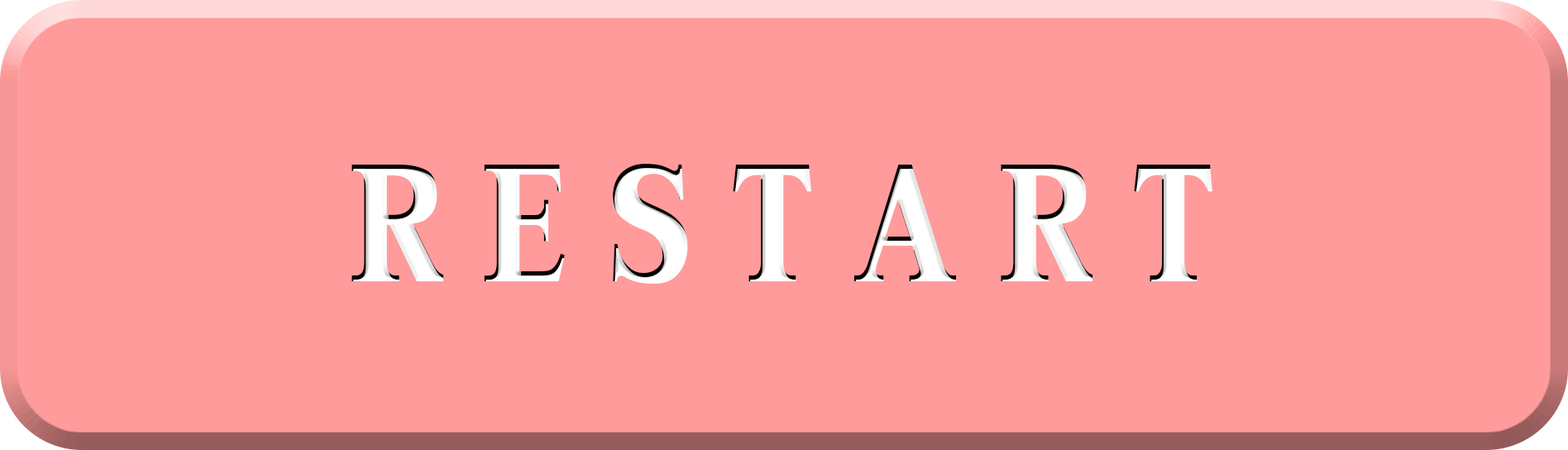
<style>
.page{position:relative;width:1568px;height:450px;background:#ff9b9b}
.page>*{position:absolute;margin:0}
.t1{font:241.2px "KodchiangUPCBold";letter-spacing:0.16em;color:#ffffff}
</style>
<div class="page">
<p class="t1" style="left:351px;top:164px;width:861px;height:120px">RESTART</p>
</div>
